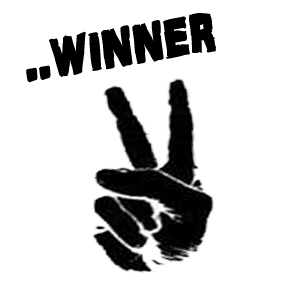
<style>
.page{position:relative;width:300px;height:300px;background:#ffffff}
.page>*{position:absolute;margin:0}
.t1{font:53.2px "ARDARLING";color:#000000;font-weight:bold;scale:0.71 1}
.t2{font:58.3px "ARDARLING";color:#000000;font-weight:bold;scale:0.71 1}
.t3{font:55px "ARDARLING";color:#000000;font-weight:bold;scale:0.71 1}
</style>
<div class="page">
<p class="t1" style="left:26px;top:13px;width:190px;height:70px;rotate:-10deg">..WINN<span class="t2">E</span><span class="t3">R</span></p>
</div>
